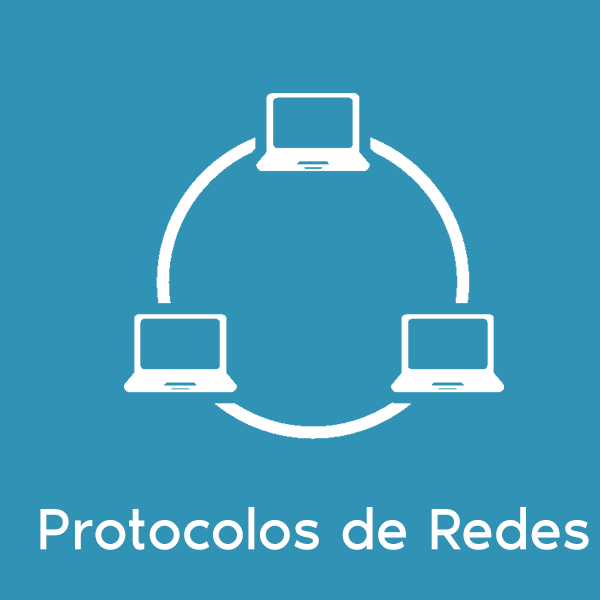
<style>
.page{position:relative;width:600px;height:600px;background:#3093b5}
.page>*{position:absolute;margin:0}
.t1{font:60px "NoirStd-Regular";color:#ffffff}
</style>
<div class="page">
<p class="t1" style="left:40px;top:507px;width:549px;height:43px">Protocolos de Redes</p>
</div>
